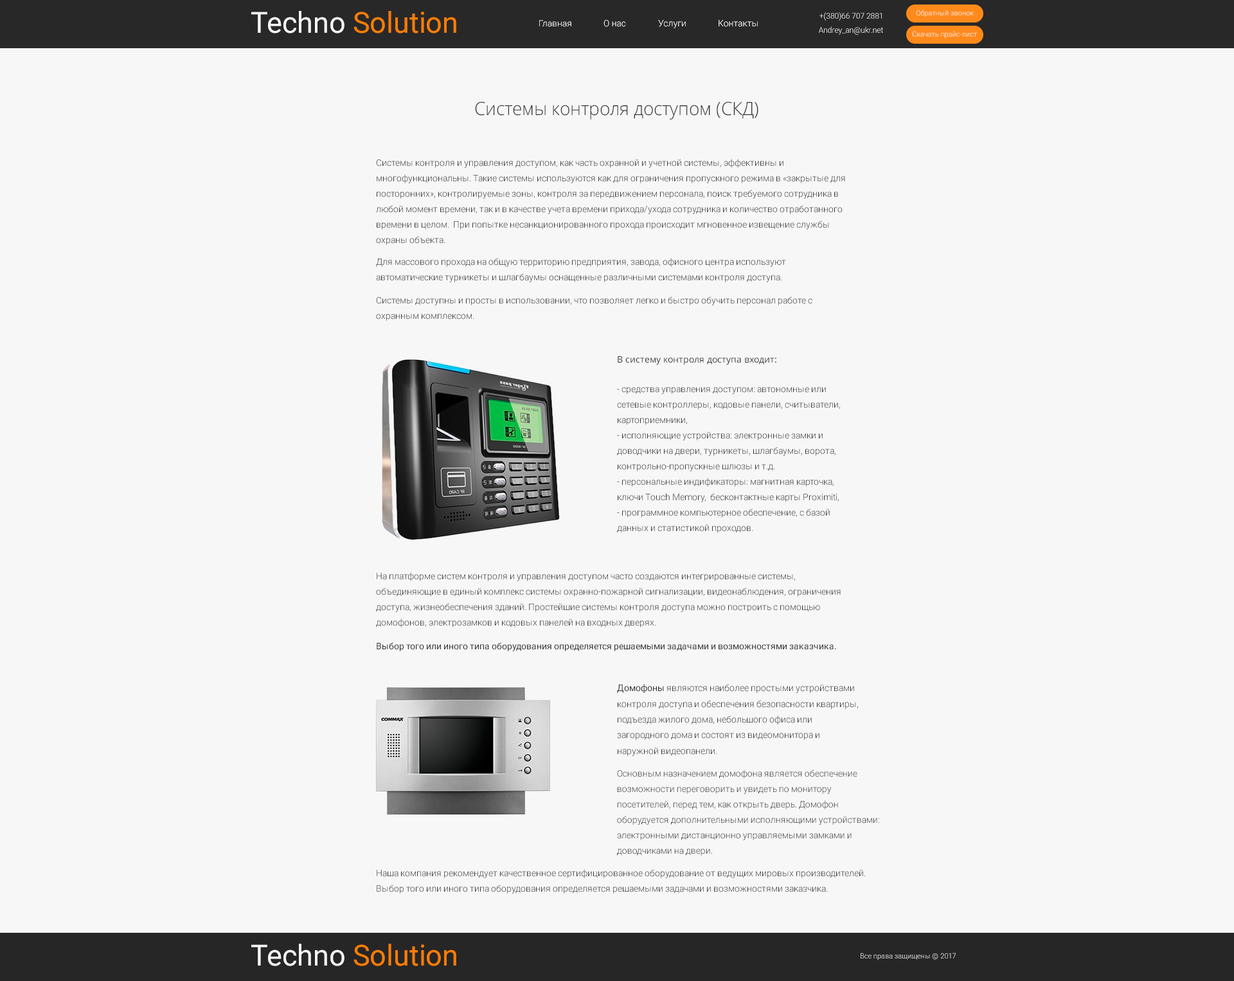
<style>
.page{position:relative;width:1234px;height:981px;background:#f7f7f7}
.page>*{position:absolute;margin:0}
.t1{font:29.1px "Roboto-Regular";color:#fb7d04}
.t2{font:29.1px "Roboto-Regular";color:#f7f7f7}
.t3{font:7.9px "Roboto-Light"}
.t4{font:6.8px "Roboto-Light";scale:1.04 1}
.t5{font:8.7px "Roboto-Light";color:#ffffff}
.t6{font:9px "Roboto-Light"}
.t7{font:9px "Roboto-Light";color:#ffffff}
.t8{font:7.9px "Roboto-Light";color:#ffffff}
.t9{font:7.4px "Roboto-Light";scale:0.96 1}
.t10{font:18.3px "OpenSans-Light";color:#333333}
.t11{font:9px/15.5px "Roboto-Light";color:#333333}
.t12{font:9.1px/15.5px "Roboto-Light";color:#333333}
.t13{font:9px/15.4px "Roboto-Light";color:#333333}
.t14{font:9px "OpenSans";color:#333333}
.t15{font:9px "Roboto-Regular";color:#333333}
.t16{font:9.1px/15.7px "Roboto-Light";color:#333333}
.t17{font:9.1px/15.7px "Roboto-Regular";color:#333333}
.t18{font:7.4px "Roboto-Light";color:#efefef;scale:0.95 1}
.t19{font:8px "Roboto-Light"}
</style>
<div class="page">
<p class="t1" style="left:251px;top:11px;width:205px;height:22px"><span class="t2">Techno </span>Solution</p>
<p class="t3" style="left:820px;top:12px;width:62px;height:9px">+(380)66 707 2881</p>
<p class="t4" style="left:916px;top:10px;width:58px;height:7px">Обратный звонок</p>
<p class="t5" style="left:539px;top:20px;width:33px;height:7px">Главная</p>
<p class="t6" style="left:604px;top:20px;width:22px;height:7px">О нас</p>
<p class="t7" style="left:658px;top:20px;width:28px;height:8px">Услуги</p>
<p class="t7" style="left:719px;top:20px;width:39px;height:7px">Контакты</p>
<p class="t8" style="left:819px;top:26px;width:64px;height:9px">Andrey_an@ukr.net</p>
<p class="t9" style="left:912px;top:31px;width:65px;height:8px">Скачать прайс-лист</p>
<p class="t10" style="left:475px;top:102px;width:284px;height:18px">Системы контроля доступом (СКД)</p>
<p class="t11" style="left:376px;top:159px;width:469px;height:86px">Системы контроля и управления доступом, как часть охранной и учетной системы, эффективны и <br>многофункциональны. Такие системы используются как для ограничения пропускного режима в «закрытые для <br>посторонних», контролируемые зоны, контроля за передвижением персонала, поиск требуемого сотрудника в <br>любой момент времени, так и в качестве учета времени прихода/ухода сотрудника и количество отработанного <br>времени в целом.  При попытке несанкционированного прохода происходит мгновенное извещение службы <br>охраны объекта.</p>
<p class="t12" style="left:376px;top:258px;width:410px;height:24px">Для массового прохода на общую территорию предприятия, завода, офисного центра используют <br>автоматические турникеты и шлагбаумы оснащенные различными системами контроля доступа.</p>
<p class="t13" style="left:376px;top:296px;width:437px;height:25px">Системы доступны и просты в использовании, что позволяет легко и быстро обучить персонал работе с <br>охранным комплексом.</p>
<p class="t14" style="left:618px;top:356px;width:159px;height:9px">В систему контроля доступа входит:</p>
<p class="t11" style="left:617px;top:387px;width:223px;height:146px">- средства управления доступом: автономные или <br>сетевые контроллеры, кодовые панели, считыватели, <br>картоприемники,<br>- исполняющие устройства: электронные замки и <br>доводчики на двери, турникеты, шлагбаумы, ворота, <br>контрольно-пропускные шлюзы и т.д.<br>- персональные индификаторы: магнитная карточка, <br>ключи Touch Memory,  бесконтактные карты Proximiti,<br>- программное компьютерное обеспечение, с базой <br>данных и статистикой проходов.</p>
<p class="t11" style="left:376px;top:572px;width:465px;height:55px">На платформе систем контроля и управления доступом часто создаются интегрированные системы, <br>объединяющие в единый комплекс системы охранно-пожарной сигнализации, видеонаблюдения, ограничения <br>доступа, жизнеобеспечения зданий. Простейшие системы контроля доступа можно построить с помощью <br>домофонов, электрозамков и кодовых панелей на входных дверях.</p>
<p class="t15" style="left:377px;top:642px;width:459px;height:9px">Выбор того или иного типа оборудования определяется решаемыми задачами и возможностями заказчика.</p>
<p class="t16" style="left:617px;top:684px;width:241px;height:72px"><span class="t17">Домофоны</span> являются наиболее простыми устройствами <br>контроля доступа и обеспечения безопасности квартиры, <br>подъезда жилого дома, небольшого офиса или <br>загородного дома и состоят из видеомонитора и <br>наружной видеопанели.</p>
<p class="t13" style="left:617px;top:770px;width:262px;height:86px">Основным назначением домофона является обеспечение <br>возможности переговорить и увидеть по монитору <br>посетителей, перед тем, как открыть дверь. Домофон <br>оборудуется дополнительными исполняющими устройствами: <br>электронными дистанционно управляемыми замками и <br>доводчиками на двери.</p>
<p class="t13" style="left:377px;top:869px;width:489px;height:25px">Наша компания рекомендует качественное сертифицированное оборудование от ведущих мировых производителей. <br>Выбор того или иного типа оборудования определяется решаемыми задачами и возможностями заказчика.</p>
<p class="t1" style="left:251px;top:944px;width:205px;height:22px"><span class="t2">Techno </span>Solution</p>
<p class="t18" style="left:861px;top:953px;width:95px;height:7px">Все права защищены      2017</p>
<p class="t19" style="left:932px;top:953px;width:7px;height:7px">©</p>
</div>
